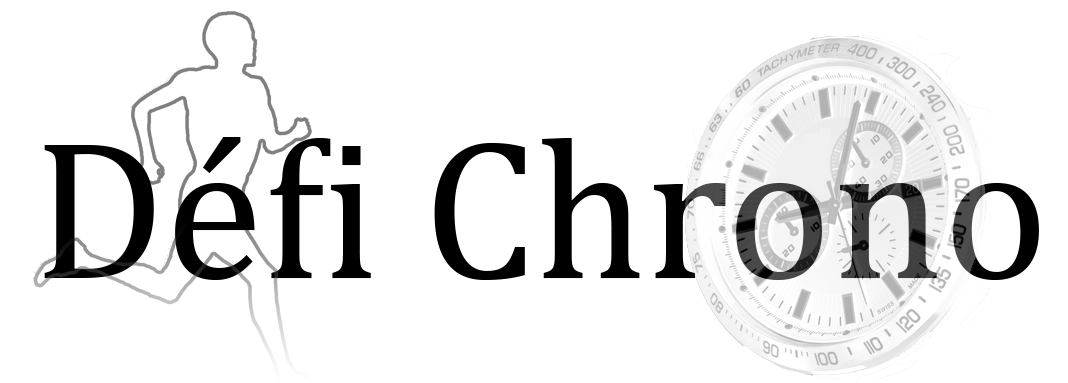
<style>
.page{position:relative;width:1068px;height:383px;background:#ffffff}
.page>*{position:absolute;margin:0}
.t1{font:200px "Cambria";color:#000000}
</style>
<div class="page">
<p class="t1" style="left:44px;top:137px;width:995px;height:143px">Défi Chrono</p>
</div>
